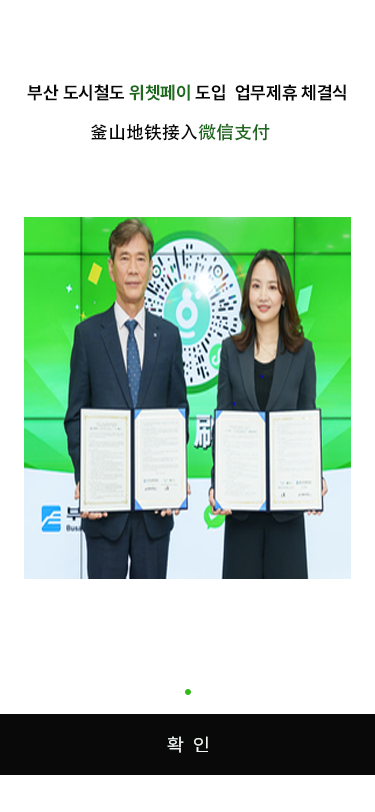
<style>
.page{position:relative;width:375px;height:812px;background:#ffffff}
.page>*{position:absolute;margin:0}
.t1{font:18px "Pretendard-Bold";color:#090909}
.t2{font:18px "Pretendard-Bold";color:#1c6a1c}
.t3{font:18px "AdobeHeitiStd-Regular";color:#090909}
.t4{font:18px "AdobeHeitiStd-Regular";color:#1c6a1c}
.t5{font:18px "Pretendard-Regular";color:#f2f6f2;scale:1.07 1}
</style>
<div class="page">
<p class="t1" style="left:27px;top:84px;width:319px;height:17px">부산 도시철도 <span class="t2">위쳇페이 </span>도입  업무제휴 체결식</p>
<p class="t3" style="left:91px;top:123px;width:179px;height:18px">釜山地铁接入<span class="t4">微信支付</span></p>
<p class="t5" style="left:167px;top:736px;width:41px;height:17px">확  인</p>
</div>
